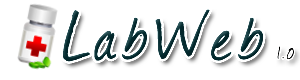
<style>
.page{position:relative;width:300px;height:80px;background:#ffffff}
.page>*{position:absolute;margin:0}
.t1{font:85px "Journal";letter-spacing:0.075em;color:#032a2f;font-weight:bold}
.t2{font:18px "Journal";letter-spacing:0.075em;color:#000101;font-weight:bold}
</style>
<div class="page">
<p class="t1" style="left:62px;top:9px;width:202px;height:53px">LabWeb</p>
<p class="t2" style="left:277px;top:46px;width:17px;height:14px">1.0</p>
</div>
